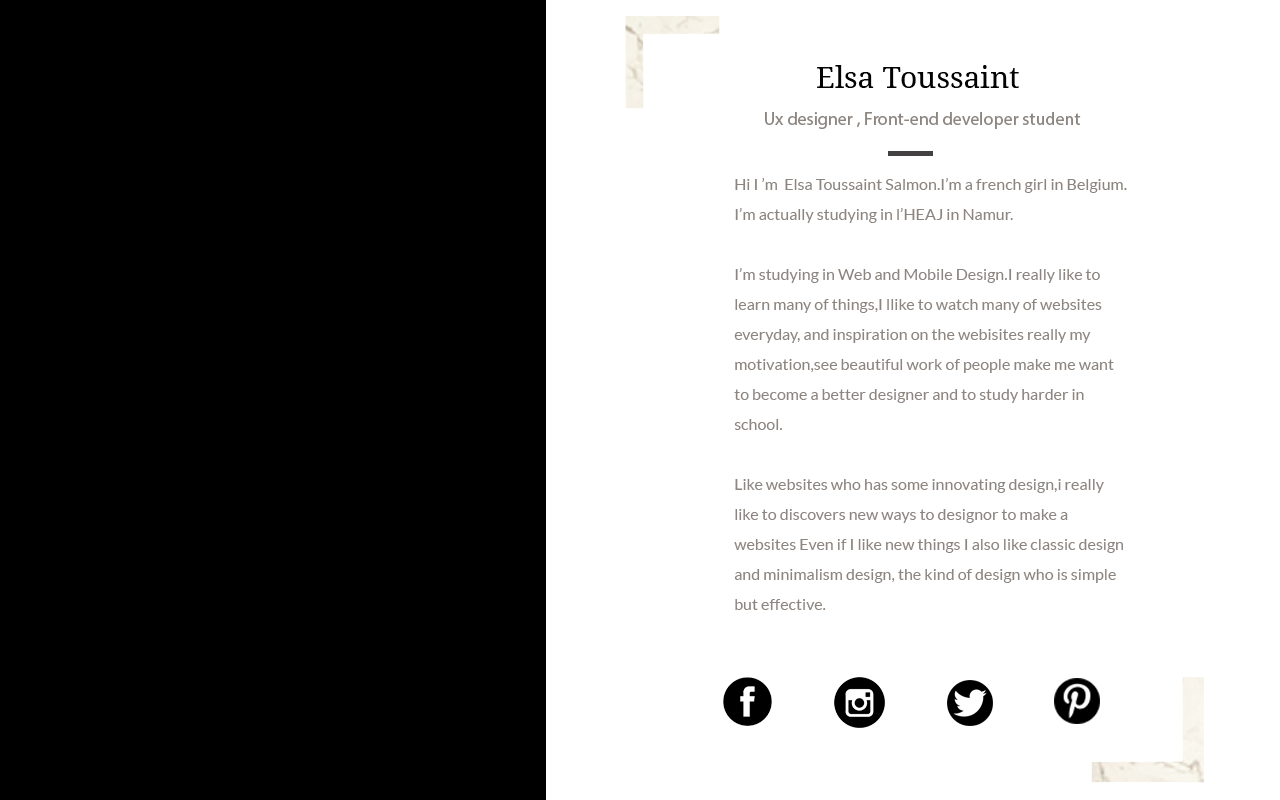
<style>
.page{position:relative;width:1280px;height:800px;background:#ffffff}
.page>*{position:absolute;margin:0}
.t1{font:30px "DroidSerif";color:#030303}
.t2{font:18px "MyriadPro-Regular";color:#8c8580}
.t3{font:48px "MyriadPro-Regular";color:#8c8580}
.t4{font:16px/30px "Lato-Regular";color:#8c8580}
</style>
<div class="page">
<p class="t1" style="left:817px;top:65px;width:202px;height:23px">Elsa Toussaint</p>
<p class="t2" style="left:765px;top:112px;width:316px;height:17px"><span class="t3"> </span>Ux designer , Front-end developer student</p>
<p class="t4" style="left:734px;top:178px;width:393px;height:432px">Hi I ’m  Elsa Toussaint Salmon.I’m a french girl in Belgium. I’m actually studying in l’HEAJ in Namur. <br><br>I’m studying in Web and Mobile Design.I really like to learn many of things,I llike to watch many of websites everyday, and inspiration on the webisites really my motivation,see beautiful work of people make me want to become a better designer and to study harder in school.<br><br>Like websites who has some innovating design,i really like to discovers new ways to designor to make a websites Even if I like new things I also like classic design and minimalism design, the kind of design who is simple but effective.</p>
</div>
